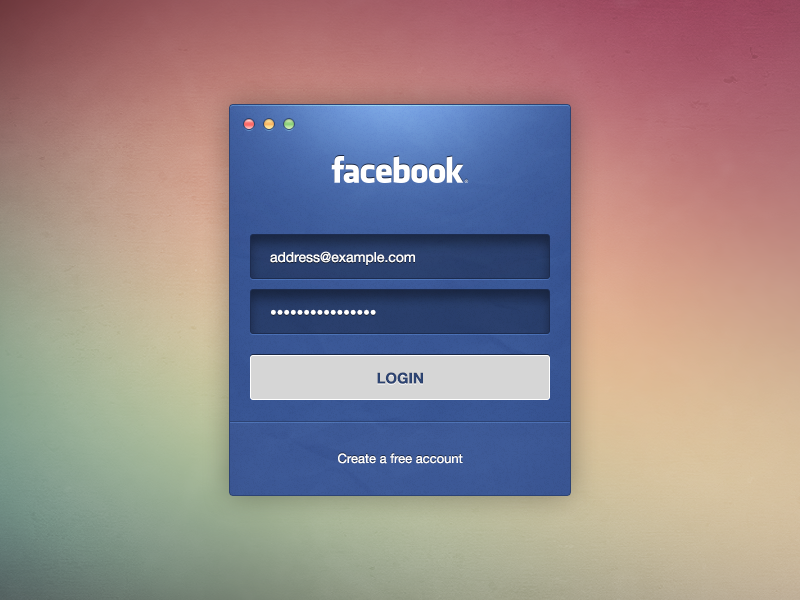
<style>
.page{position:relative;width:800px;height:600px}
.page>*{position:absolute;margin:0}
.t1{font:14px "HelveticaNeue";color:#ffffff}
.t2{font:19px "ArialMT";color:#ffffff}
.t3{font:15px "HelveticaNeue-Bold";color:#2f4778;text-transform:uppercase}
.t4{font:13px "HelveticaNeue";color:#ffffff}
</style>
<div class="page">
<p class="t1" style="left:270px;top:251px;width:145px;height:14px">address@example.com</p>
<p class="t2" style="left:271px;top:309px;width:105px;height:6px">••••••••••••••••</p>
<p class="t3" style="left:377px;top:372px;width:46px;height:12px">Login</p>
<p class="t4" style="left:338px;top:453px;width:125px;height:11px">Create a free account</p>
</div>
